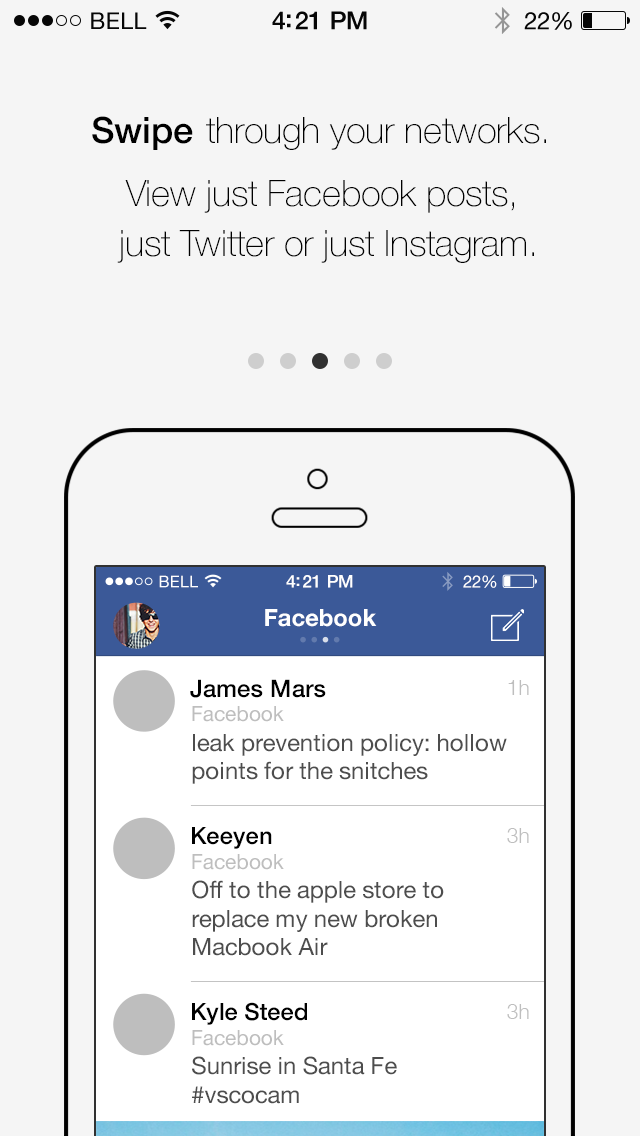
<style>
.page{position:relative;width:640px;height:1136px;background:#f5f5f5}
.page>*{position:absolute;margin:0}
.t1{font:23px "HelveticaNeue";letter-spacing:0.02em;color:#060606}
.t2{font:25px "HelveticaNeue-Medium";letter-spacing:-0.02em;color:#060606}
.t3{font:24px "HelveticaNeue";letter-spacing:-0.02em;color:#060606}
.t4{font:36.2px "HelveticaNeue-Medium";color:#000000}
.t5{font:36.2px "HelveticaNeue-Thin";color:#000000}
.t6{font:16.1px "HelveticaNeue";letter-spacing:0.02em;color:#ffffff}
.t7{font:17.5px "HelveticaNeue-Medium";letter-spacing:-0.02em;color:#ffffff}
.t8{font:16.8px "HelveticaNeue";letter-spacing:-0.02em;color:#ffffff}
.t9{font:23.8px "HelveticaNeue-Bold";color:#ffffff}
.t10{font:24px "HelveticaNeue-Medium";color:#000000}
.t11{font:21px "HelveticaNeue-Light";color:#bebebe}
.t12{font:21px "HelveticaNeue";color:#bebebe}
.t13{font:23.8px "HelveticaNeue";color:#4d4d4d}
.t14{font:23.8px "HelveticaNeue-Medium";color:#000000}
</style>
<div class="page">
<p class="t1" style="left:91px;top:12px;width:56px;height:17px">BELL</p>
<p class="t2" style="left:272px;top:11px;width:95px;height:19px">4:21 PM</p>
<p class="t3" style="left:524px;top:12px;width:48px;height:18px">22%</p>
<p class="t4" style="left:92px;top:116px;width:101px;height:34px">Swipe</p>
<p class="t5" style="left:206px;top:117px;width:340px;height:33px">through your networks.</p>
<p class="t5" style="left:125px;top:180px;width:389px;height:33px">View just Facebook posts,</p>
<p class="t5" style="left:117px;top:230px;width:417px;height:33px">just Twitter or just Instagram.</p>
<p class="t6" style="left:159px;top:575px;width:39px;height:13px">BELL</p>
<p class="t7" style="left:286px;top:575px;width:67px;height:13px">4:21 PM</p>
<p class="t8" style="left:463px;top:575px;width:34px;height:13px">22%</p>
<p class="t9" style="left:265px;top:609px;width:112px;height:18px">Facebook</p>
<p class="t10" style="left:190px;top:679px;width:136px;height:19px">James Mars</p>
<p class="t11" style="left:508px;top:680px;width:21px;height:15px">1h</p>
<p class="t12" style="left:192px;top:706px;width:92px;height:16px">Facebook</p>
<p class="t13" style="left:192px;top:734px;width:315px;height:50px">leak prevention policy: hollow<br>points for the snitches</p>
<p class="t14" style="left:192px;top:827px;width:80px;height:22px">Keeyen</p>
<p class="t11" style="left:507px;top:828px;width:22px;height:15px">3h</p>
<p class="t12" style="left:192px;top:854px;width:92px;height:16px">Facebook</p>
<p class="t13" style="left:192px;top:880px;width:252px;height:76px">Off to the apple store to<br>replace my new broken<br>Macbook Air</p>
<p class="t14" style="left:192px;top:1002px;width:115px;height:23px">Kyle Steed</p>
<p class="t11" style="left:507px;top:1004px;width:22px;height:15px">3h</p>
<p class="t12" style="left:192px;top:1030px;width:92px;height:16px">Facebook</p>
<p class="t13" style="left:192px;top:1056px;width:205px;height:48px">Sunrise in Santa Fe <br>#vscocam</p>
</div>
